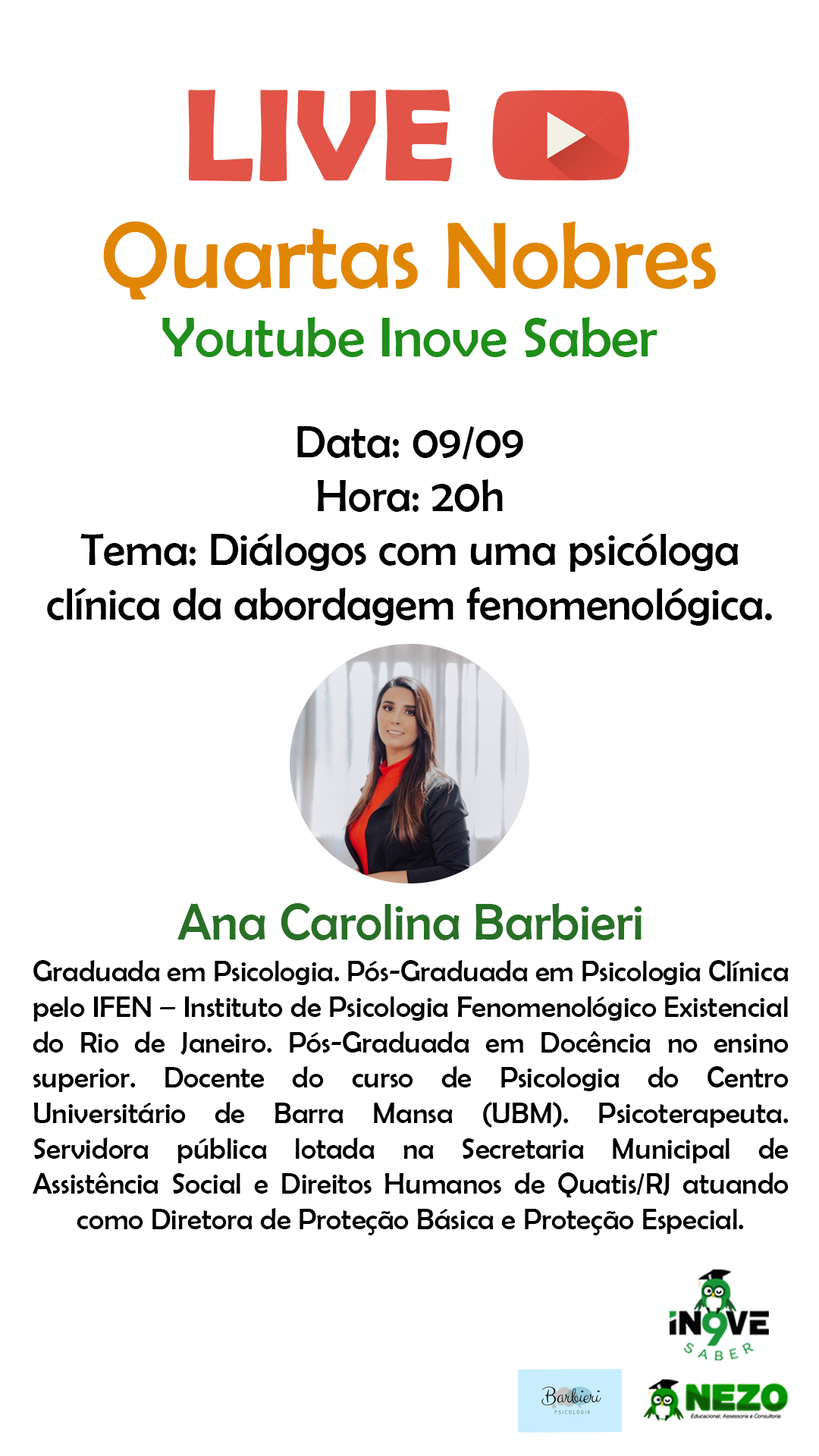
<style>
.page{position:relative;width:819px;height:1456px;background:#ffffff}
.page>*{position:absolute;margin:0}
.t1{font:131.8px "BerlinSansFBDemi-Bold";color:#e15447}
.t2{font:56.9px "BerlinSansFB-Reg";color:#1f8f1a}
.t3{font:94.8px "BerlinSansFB-Reg";color:#e18604}
.t4{font:45.1px "BerlinSansFB-Reg";color:#000000}
.t5{font:45.1px/64.5px "BerlinSansFB-Reg";color:#000000}
.t6{font:29.5px "BerlinSansFB-Reg";color:#000000}
.t7{font:51.6px "BerlinSansFB-Reg";color:#287026}
.t8{font:29.5px/41.9px "BerlinSansFB-Reg";color:#000000}
</style>
<div class="page">
<p class="t1" style="left:188px;top:89px;width:264px;height:93px">LIVE</p>
<p class="t2" style="left:103px;top:221px;width:613px;height:136px;text-align:center"><span class="t3">Quartas Nobres<br></span>Youtube Inove Saber</p>
<p class="t4" style="left:47px;top:426px;width:725px;height:200px;text-align:center"><span class="t5">Data: 09/09<br></span>Hora: 20h<br>Tema: Diálogos com uma psicóloga clínica da abordagem fenomenológica.</p>
<p class="t6" style="left:33px;top:903px;width:756px;height:332px;text-align:justify"><span class="t7">Ana Carolina Barbieri<br></span><span class="t8">Graduada em Psicologia. </span>Pós-Graduada em Psicologia Clínica pelo IFEN – Instituto de Psicologia Fenomenológico Existencial do Rio de Janeiro. Pós-Graduada em Docência no ensino superior. Docente do curso de Psicologia do Centro Universitário de Barra Mansa (UBM). Psicoterapeuta. Servidora pública lotada na Secretaria Municipal de Assistência Social e Direitos Humanos de Quatis/RJ atuando como Diretora de Proteção Básica e Proteção Especial.</p>
</div>
